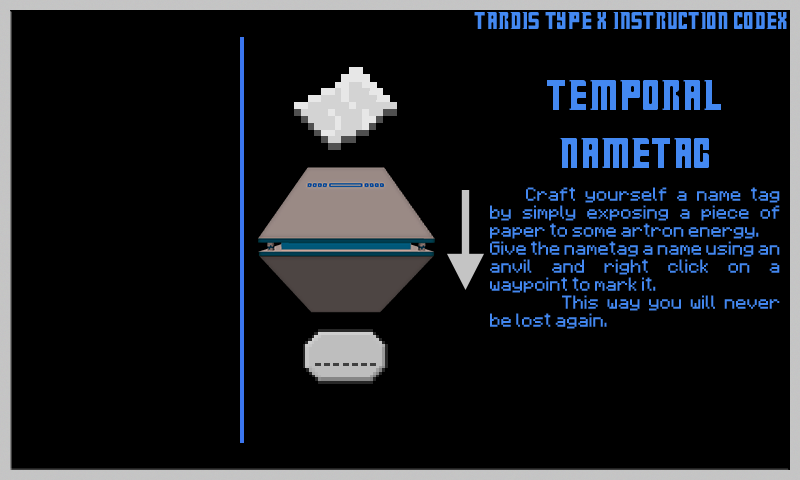
<style>
.page{position:relative;width:800px;height:480px;background:#000000}
.page>*{position:absolute;margin:0}
.t1{font:27px "Doctor-Who";color:#4388f1}
.t2{font:15px "Minecraftia-Regular";color:#4388f1}
.t3{font:48px "Doctor-Who";color:#4388f1}
</style>
<div class="page">
<p class="t1" style="left:474px;top:12px;width:313px;height:17px">TARDIS Type X Instruction Codex</p>
<p class="t2" style="left:490px;top:80px;width:290px;height:249px;text-align:center"><span class="t3">Temporal <br>nameTag<br> <br></span> Craft yourself a name tag by simply exposing a piece of paper to some artron energy.<br>Give the nametag a name using an anvil and right click on a waypoint to mark it.<br>  This way you will never be lost again.</p>
</div>
